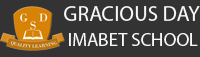
<style>
.page{position:relative;width:200px;height:57px;background:#333333}
.page>*{position:absolute;margin:0}
.t1{font:21.3px "MyriadPro-Regular";color:#faf7f7}
.t2{font:18.7px "MyriadPro-Regular";color:#faf7f7}
</style>
<div class="page">
<p class="t1" style="left:64px;top:6px;width:136px;height:15px">GRACIOUS DAY</p>
<p class="t2" style="left:69px;top:33px;width:129px;height:13px">IMABET SCHOOL</p>
</div>
